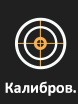
<style>
.page{position:relative;width:78px;height:104px;background:#202020}
.page>*{position:absolute;margin:0}
.t1{font:12px "Calibri-Bold";color:#ffffff}
</style>
<div class="page">
<p class="t1" style="left:5px;top:81px;width:71px;height:15px">Калибров.</p>
</div>
